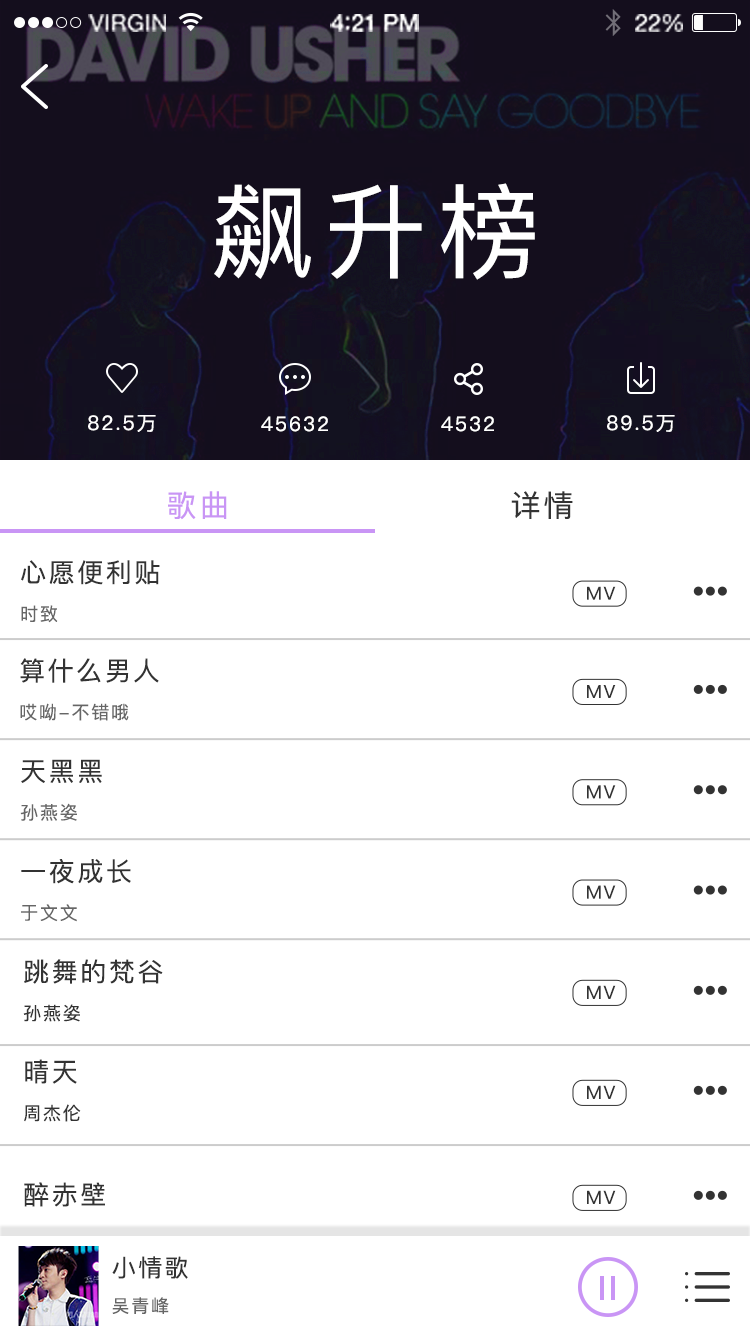
<style>
.page{position:relative;width:750px;height:1334px;background:#ffffff}
.page>*{position:absolute;margin:0}
.t1{font:23px "HelveticaNeue";letter-spacing:0.02em;color:#fdfdfd}
.t2{font:24px "HelveticaNeue-Medium";letter-spacing:-0.02em;color:#fdfdfd}
.t3{font:26px "Avenir-Medium";letter-spacing:-0.02em;color:#fdfdfd}
.t4{font:24px "HelveticaNeue";letter-spacing:-0.02em;color:#fafafa}
.t5{font:102.8px "PingFang-SC-Medium";letter-spacing:0.1em;color:#ffffff}
.t6{font:20px "PingFang-SC-Medium";letter-spacing:0.1em;color:#ffffff}
.t7{font:30px "PingFang-SC-Medium";letter-spacing:0.1em;color:#c995f5}
.t8{font:30px "PingFang-SC-Medium";letter-spacing:0.1em;color:#333333}
.t9{font:26px "PingFang-SC-Medium";letter-spacing:0.1em;color:#333333}
.t10{font:18px "PingFang-SC-Medium";letter-spacing:0.1em;color:#666666}
.t11{font:18.1px "PingFang-SC-Medium";letter-spacing:0.1em;color:#333333}
.t12{font:18px "PingFang-SC-Medium";letter-spacing:0.1em;color:#333333}
.t13{font:24px "PingFang-SC-Medium";letter-spacing:0.1em;color:#333333}
</style>
<div class="page">
<p class="t1" style="left:88px;top:14px;width:78px;height:18px">VIRGIN</p>
<p class="t2" style="left:330px;top:14px;width:89px;height:18px">4<span class="t3">:</span>21 PM</p>
<p class="t4" style="left:635px;top:14px;width:48px;height:18px">22%</p>
<p class="t5" style="left:214px;top:183px;width:321px;height:97px">飙升榜</p>
<p class="t6" style="left:88px;top:415px;width:68px;height:17px">82.5万</p>
<p class="t6" style="left:261px;top:416px;width:67px;height:16px">45632</p>
<p class="t6" style="left:441px;top:416px;width:53px;height:16px">4532</p>
<p class="t6" style="left:607px;top:415px;width:68px;height:17px">89.5万</p>
<p class="t7" style="left:168px;top:491px;width:59px;height:29px">歌曲</p>
<p class="t8" style="left:511px;top:491px;width:62px;height:28px">详情</p>
<p class="t9" style="left:21px;top:560px;width:139px;height:63px">心愿便利贴<br><span class="t10">时致</span></p>
<p class="t11" style="left:587px;top:586px;width:29px;height:14px">MV</p>
<p class="t10" style="left:20px;top:658px;width:139px;height:63px"><span class="t9">算什么男人<br></span>哎呦-不错哦</p>
<p class="t11" style="left:587px;top:685px;width:29px;height:13px">MV</p>
<p class="t9" style="left:20px;top:759px;width:82px;height:62px">天黑黑<br><span class="t10">孙燕姿</span></p>
<p class="t11" style="left:587px;top:785px;width:29px;height:14px">MV</p>
<p class="t9" style="left:21px;top:859px;width:110px;height:63px">一夜成长<br><span class="t10">于文文</span></p>
<p class="t11" style="left:587px;top:885px;width:29px;height:14px">MV</p>
<p class="t9" style="left:23px;top:959px;width:140px;height:63px">跳舞的梵谷<br><span class="t12">孙燕姿</span></p>
<p class="t11" style="left:587px;top:985px;width:29px;height:14px">MV</p>
<p class="t12" style="left:24px;top:1059px;width:57px;height:63px"><span class="t9">晴天<br></span>周杰伦</p>
<p class="t11" style="left:587px;top:1085px;width:29px;height:14px">MV</p>
<p class="t9" style="left:24px;top:1182px;width:81px;height:25px">醉赤壁</p>
<p class="t11" style="left:587px;top:1190px;width:29px;height:14px">MV</p>
<p class="t13" style="left:112px;top:1256px;width:76px;height:23px">小情歌</p>
<p class="t10" style="left:112px;top:1297px;width:57px;height:17px">吴青峰</p>
</div>
